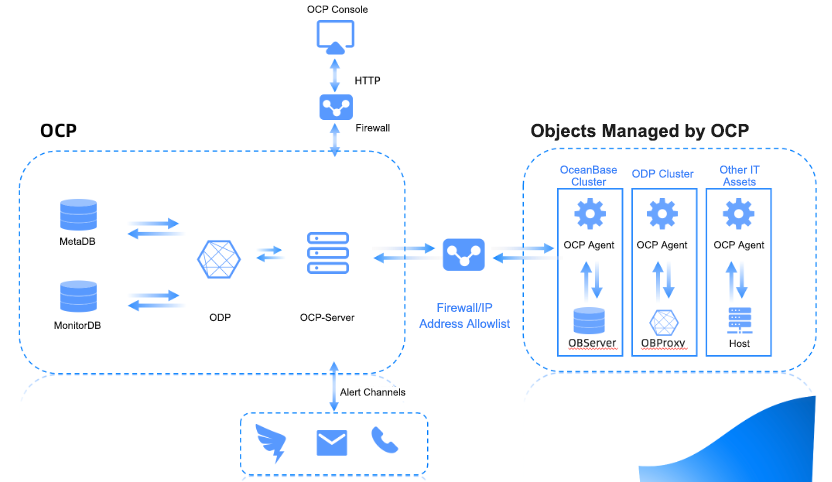
<style>
.page{position:relative;width:832px;height:482px;background:#ffffff}
.page>*{position:absolute;margin:0}
.t1{font:10px "ArialMT";color:#1d1d1d}
.t2{font:18px "Arial-BoldMT";color:#1d1d1d}
.t3{font:11px/12px "ArialMT";color:#3984f9}
.t4{font:11px "ArialMT";color:#3984f9}
.t5{font:12px/16px "ArialMT";color:#3984f9}
</style>
<div class="page">
<p class="t1" style="left:307px;top:5px;width:61px;height:8px">OCP Console</p>
<p class="t1" style="left:356px;top:124px;width:34px;height:8px">Firewall</p>
<p class="t2" style="left:531px;top:123px;width:218px;height:18px">Objects Managed by OCP</p>
<p class="t3" style="left:560px;top:165px;width:57px;height:21px;text-align:center">OceanBase Cluster</p>
<p class="t4" style="left:632px;top:169px;width:62px;height:9px">ODP Cluster</p>
<p class="t3" style="left:720px;top:165px;width:40px;height:21px;text-align:center">Other IT Assets</p>
<p class="t1" style="left:60px;top:237px;width:36px;height:8px">MetaDB</p>
<p class="t1" style="left:564px;top:241px;width:51px;height:10px">OCP Agent</p>
<p class="t1" style="left:637px;top:241px;width:51px;height:10px">OCP Agent</p>
<p class="t1" style="left:714px;top:241px;width:51px;height:10px">OCP Agent</p>
<p class="t5" style="left:419px;top:303px;width:91px;height:25px;text-align:center">Firewall/IP Address Allowlist</p>
<p class="t1" style="left:209px;top:313px;width:22px;height:9px">ODP</p>
<p class="t1" style="left:300px;top:313px;width:55px;height:9px">OCP-Server</p>
<p class="t1" style="left:54px;top:321px;width:47px;height:8px">MonitorDB</p>
<p class="t1" style="left:729px;top:339px;width:21px;height:9px">Host</p>
<p class="t1" style="left:340px;top:388px;width:66px;height:8px">Alert Channels</p>
</div>
